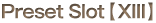
<style>
.page{position:relative;width:156px;height:23px;background:#ffffff}
.page>*{position:absolute;margin:0}
.t1{font:18px "GothicMB101Pro-DeBold";letter-spacing:-0.04em}
.t2{font:18px "GothicMB101Pro-DeBold";letter-spacing:-0.04em;color:#8b6e51}
</style>
<div class="page">
<p class="t1" style="left:2px;top:2px;width:151px;height:19px">Preset Slot【      】</p>
<p class="t2" style="left:117px;top:4px;width:28px;height:15px;opacity:0.9">XIII</p>
</div>
